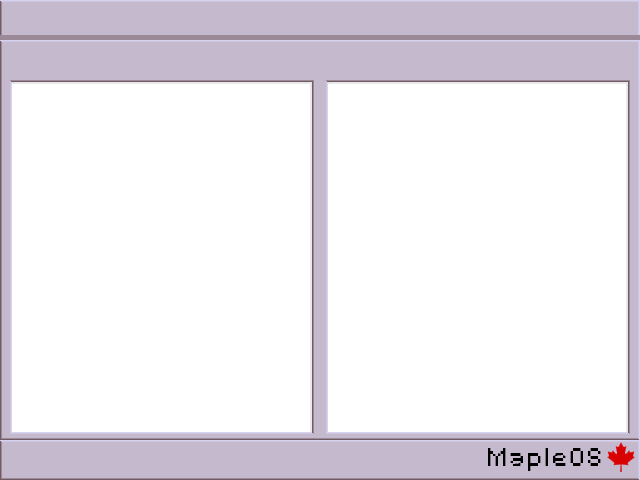
<style>
.page{position:relative;width:640px;height:480px;background:#ffffff}
.page>*{position:absolute;margin:0}
.t1{font:25px "SFPixelate";color:#000000}
</style>
<div class="page">
<p class="t1" style="left:488px;top:448px;width:113px;height:23px">MapleOS</p>
</div>
